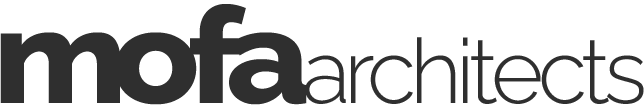
<style>
.page{position:relative;width:644px;height:108px;background:#ffffff}
.page>*{position:absolute;margin:0}
.t1{font:134px "Raleway-ExtraBold";letter-spacing:-0.11em;color:#2f2f2f;scale:1.07 1}
.t2{font:134px "Raleway-ExtraBold";letter-spacing:-0.105em;color:#2f2f2f;scale:1.07 1}
.t3{font:134px "Raleway-ExtraBold";letter-spacing:-0.085em;color:#2f2f2f;scale:1.07 1}
.t4{font:90px "Raleway-Light";letter-spacing:-0.065em;color:#2f2f2f}
</style>
<div class="page">
<p class="t1" style="left:0px;top:4px;width:307px;height:101px"><span class="t2">m</span><span class="t3">o</span>fa</p>
<p class="t4" style="left:305px;top:37px;width:339px;height:67px">architects</p>
</div>
